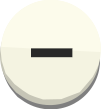
<style>
.page{position:relative;width:101px;height:109px;background:#fcfbeb}
.page>*{position:absolute;margin:0}
.t1{font:72px "MovaviGrotesqueBlack";color:#282828}
</style>
<div class="page">
<p class="t1" style="left:31px;top:48px;width:42px;height:10px">_</p>
</div>
